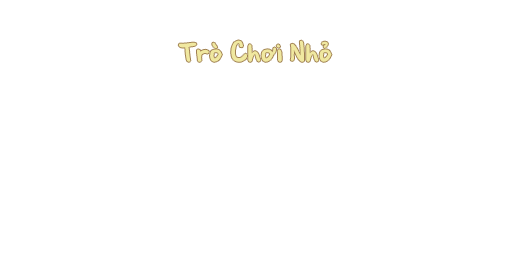
<style>
.page{position:relative;width:512px;height:256px;background:#ffffff}
.page>*{position:absolute;margin:0}
.t1{font:29.3px "BrianneTod";color:#f0e8a0}
</style>
<div class="page">
<p class="t1" style="left:178px;top:40px;width:154px;height:22px">Trò Chơi Nhỏ</p>
</div>
